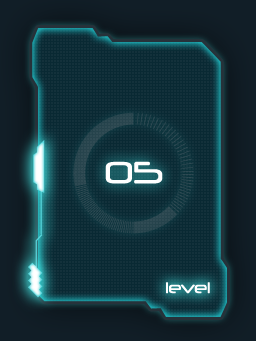
<style>
.page{position:relative;width:256px;height:341px}
.page>*{position:absolute;margin:0}
.t1{font:29.5px "Neuropol-Regular";color:#ffffff}
.t2{font:14.8px "Neuropol-Regular";color:#ffffff}
</style>
<div class="page">
<p class="t1" style="left:105px;top:161px;width:58px;height:23px">05</p>
<p class="t2" style="left:166px;top:282px;width:44px;height:12px">level</p>
</div>
